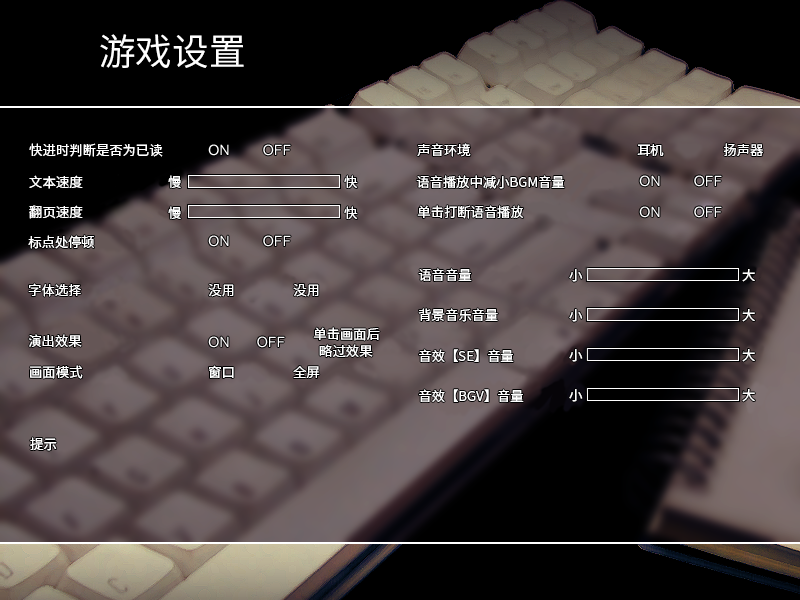
<style>
.page{position:relative;width:800px;height:600px;background:#000000}
.page>*{position:absolute;margin:0}
.t1{font:36.7px "SourceHanSansSC-Normal";color:#ffffff}
.t2{font:13.3px "SourceHanSansSC-Normal";color:#ffffff}
.t3{font:13.3px/17.3px "SourceHanSansSC-Normal";color:#ffffff}
</style>
<div class="page">
<p class="t1" style="left:100px;top:34px;width:144px;height:34px">游戏设置</p>
<p class="t2" style="left:29px;top:143px;width:134px;height:14px">快进时判断是否为已读</p>
<p class="t2" style="left:417px;top:143px;width:54px;height:14px">声音环境</p>
<p class="t2" style="left:637px;top:144px;width:27px;height:12px">耳机</p>
<p class="t2" style="left:723px;top:143px;width:40px;height:13px">扬声器</p>
<p class="t2" style="left:29px;top:175px;width:54px;height:14px">文本速度</p>
<p class="t2" style="left:168px;top:175px;width:13px;height:13px">慢</p>
<p class="t2" style="left:344px;top:175px;width:14px;height:13px">快</p>
<p class="t2" style="left:416px;top:175px;width:149px;height:14px">语音播放中减小BGM音量</p>
<p class="t2" style="left:29px;top:205px;width:54px;height:14px">翻页速度</p>
<p class="t2" style="left:168px;top:206px;width:13px;height:13px">慢</p>
<p class="t2" style="left:344px;top:206px;width:14px;height:13px">快</p>
<p class="t2" style="left:417px;top:205px;width:107px;height:14px">单击打断语音播放</p>
<p class="t2" style="left:28px;top:235px;width:66px;height:14px">标点处停顿</p>
<p class="t2" style="left:418px;top:268px;width:54px;height:13px">语音音量</p>
<p class="t2" style="left:569px;top:269px;width:14px;height:13px">小</p>
<p class="t2" style="left:742px;top:269px;width:13px;height:13px">大</p>
<p class="t2" style="left:28px;top:283px;width:53px;height:14px">字体选择</p>
<p class="t2" style="left:208px;top:284px;width:26px;height:13px">没用</p>
<p class="t2" style="left:293px;top:284px;width:26px;height:13px">没用</p>
<p class="t2" style="left:418px;top:308px;width:80px;height:14px">背景音乐音量</p>
<p class="t2" style="left:569px;top:309px;width:14px;height:13px">小</p>
<p class="t2" style="left:742px;top:309px;width:13px;height:13px">大</p>
<p class="t3" style="left:313px;top:327px;width:67px;height:30px">单击画面后<br>  略过效果</p>
<p class="t2" style="left:28px;top:334px;width:54px;height:13px">演出效果</p>
<p class="t2" style="left:419px;top:349px;width:95px;height:13px">音效【SE】音量</p>
<p class="t2" style="left:569px;top:349px;width:14px;height:13px">小</p>
<p class="t2" style="left:742px;top:349px;width:13px;height:13px">大</p>
<p class="t2" style="left:30px;top:365px;width:53px;height:14px">画面模式</p>
<p class="t2" style="left:209px;top:365px;width:25px;height:13px">窗口</p>
<p class="t2" style="left:293px;top:366px;width:27px;height:12px">全屏</p>
<p class="t2" style="left:419px;top:389px;width:105px;height:13px">音效【BGV】音量</p>
<p class="t2" style="left:569px;top:389px;width:14px;height:13px">小</p>
<p class="t2" style="left:742px;top:389px;width:13px;height:13px">大</p>
<p class="t2" style="left:30px;top:437px;width:27px;height:14px">提示</p>
</div>
